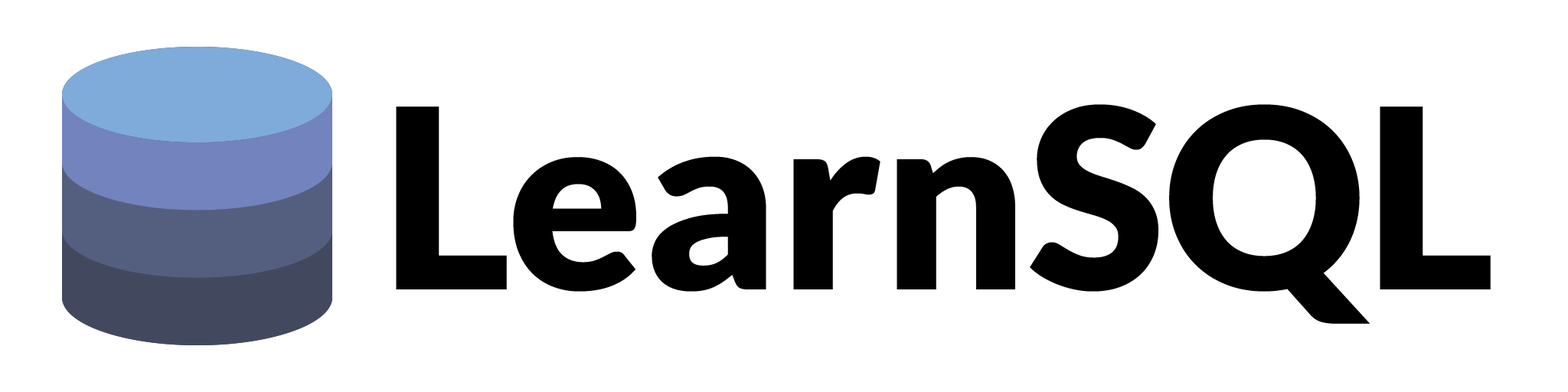
<style>
.page{position:relative;width:1568px;height:392px;background:#ffffff}
.page>*{position:absolute;margin:0}
.t1{font:250.9px "Lato-Black";color:#000000}
</style>
<div class="page">
<p class="t1" style="left:396px;top:104px;width:1095px;height:220px">LearnSQL</p>
</div>
